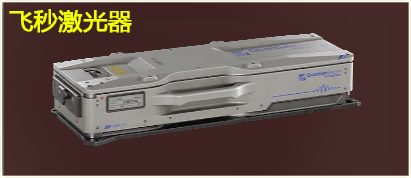
<style>
.page{position:relative;width:411px;height:178px}
.page>*{position:absolute;margin:0}
.t1{font:24px "MicrosoftYaHeiUI";color:#f4ff00;font-weight:bold}
</style>
<div class="page">
<p class="t1" style="left:9px;top:9px;width:123px;height:24px">飞秒激光器</p>
</div>
